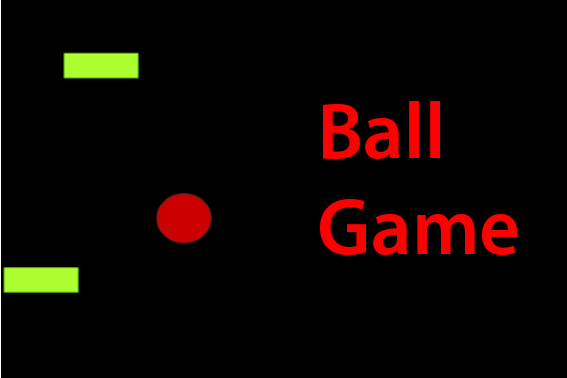
<style>
.page{position:relative;width:567px;height:378px;background:#000000}
.page>*{position:absolute;margin:0}
.t1{font:80px "MyriadPro-Semibold";color:#ff0000}
</style>
<div class="page">
<p class="t1" style="left:320px;top:101px;width:198px;height:154px">Ball<br>Game</p>
</div>
